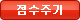
<style>
.page{position:relative;width:80px;height:20px}
.page>*{position:absolute;margin:0}
.t1{font:11px "Dotum";color:#ffffff;font-weight:bold}
</style>
<div class="page">
<p class="t1" style="left:17px;top:5px;width:45px;height:10px">점수주기</p>
</div>
